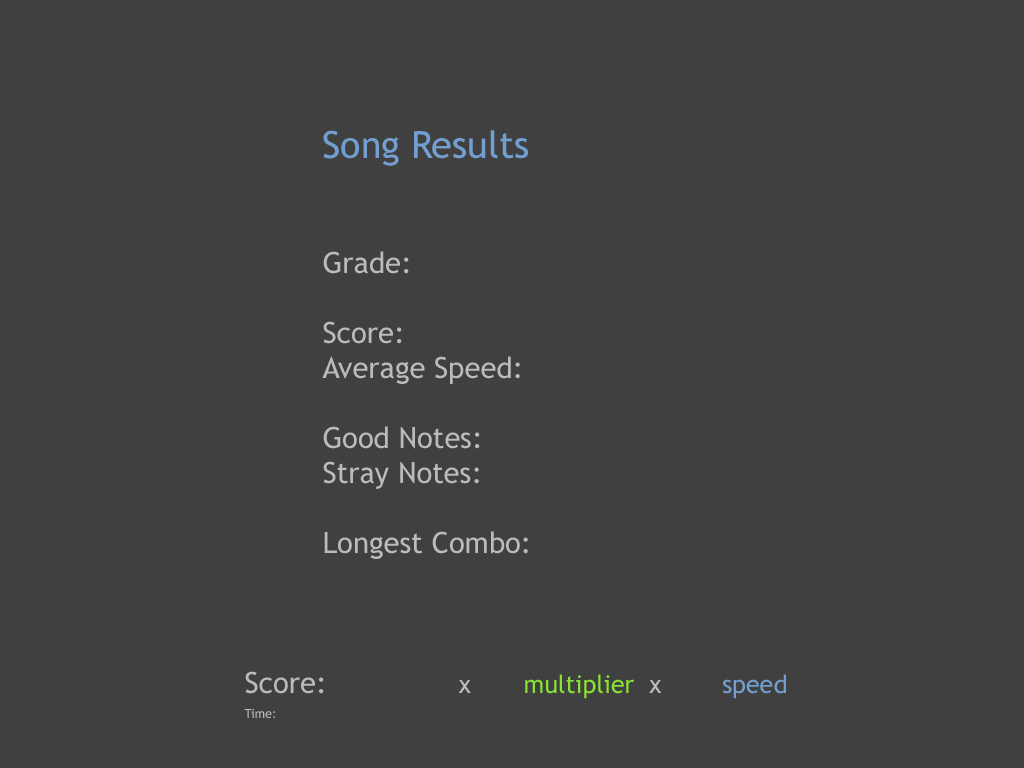
<style>
.page{position:relative;width:1024px;height:768px;background:#404040}
.page>*{position:absolute;margin:0}
.t1{font:29.2px "TrebuchetMS";color:#bbbbbb}
.t2{font:37.5px "TrebuchetMS";color:#729fcf}
.t3{font:25px "TrebuchetMS";color:#8ae234}
.t4{font:25px "TrebuchetMS";color:#bbbbbb}
.t5{font:25px "TrebuchetMS";color:#729fcf}
.t6{font:12.5px/25px "TrebuchetMS";color:#bbbbbb}
</style>
<div class="page">
<p class="t1" style="left:322px;top:130px;width:206px;height:429px;text-align:justify"><span class="t2">Song Results<br><br></span><br>Grade:<br><br>Score:<br>Average Speed:<br><br>Good Notes:<br>Stray Notes:<br><br>Longest Combo:</p>
<p class="t3" style="left:244px;top:671px;width:542px;height:47px;text-align:justify"><span class="t1">Score:               </span><span class="t4">x       </span>multiplier<span class="t4">  x        </span><span class="t5">speed<br></span><span class="t6">Time:</span></p>
</div>
